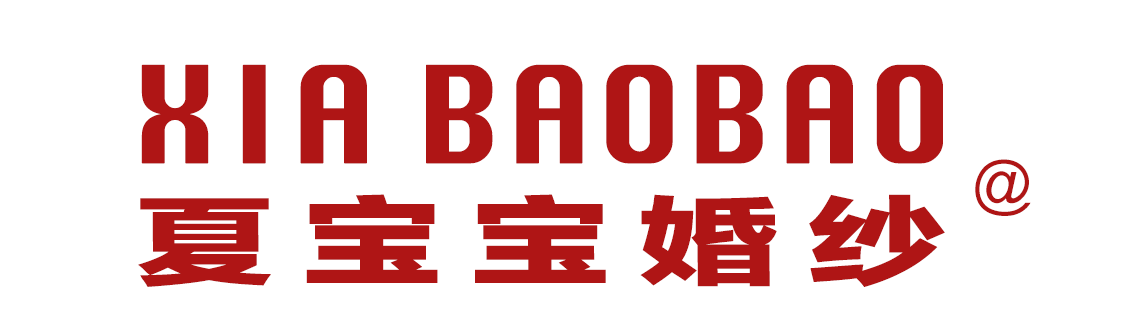
<style>
.page{position:relative;width:1139px;height:335px;background:#ffffff}
.page>*{position:absolute;margin:0}
.t1{font:130px "Krungthep";color:#af1515;font-weight:bold}
.t2{font:60px "ArialMT";color:#af1515}
.t3{font:97.2px "FZLTTHK--GBK1-0";letter-spacing:0.2em;color:#af1515;scale:1.44 1}
</style>
<div class="page">
<p class="t1" style="left:141px;top:64px;width:802px;height:100px">XIA BAOBAO</p>
<p class="t2" style="left:975px;top:159px;width:56px;height:57px">@</p>
<p class="t3" style="left:138px;top:194px;width:807px;height:93px">夏宝宝婚纱</p>
</div>
